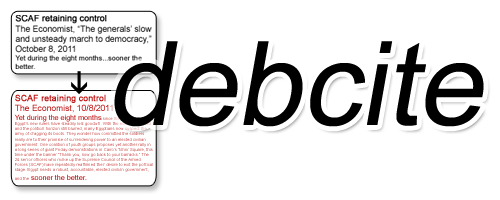
<style>
.page{position:relative;width:500px;height:200px;background:#ffffff}
.page>*{position:absolute;margin:0}
.t1{font:116.8px "ArialMT";color:#000000;font-style:italic}
.t2{font:4.3px "ArialMT";color:#bc1212}
.t3{font:8.6px "ArialMT";color:#bc1212;font-weight:bold}
.t4{font:8.6px "ArialMT";color:#bc1212}
.t5{font:7.2px "ArialMT";color:#bc1212}
</style>
<div class="page">
<p class="t1" style="left:114px;top:41px;width:370px;height:86px">debcite</p>
<p class="t2" style="left:14px;top:94px;width:139px;height:86px"><span class="t3">SCAF retaining control<br></span><span class="t4">The Economist, 10/8/2011<br></span><span class="t5">Yet during the eight months</span> since the revolution Egypt’s new rulers have steadily lost goodwill. With the economy stalled and the political horizon still blurred, many Egyptians now suspect the army of dragging its boots. They wonder how committed the soldiers really are to their promise of surrendering power to an elected civilian government. One coalition of youth groups proposes yet another rally in a long series of giant Friday demonstrations in Cairo’s Tahrir Square, this time under the banner “Thank you, now go back to your barracks.” The 24 senior officers who make up the Supreme Council of the Armed Forces (SCAF) have repeatedly reaffirmed their desire to exit the political stage. Egypt needs a robust, accountable, elected civilian government, and the<span class="t5"> sooner the better.</span></p>
</div>
